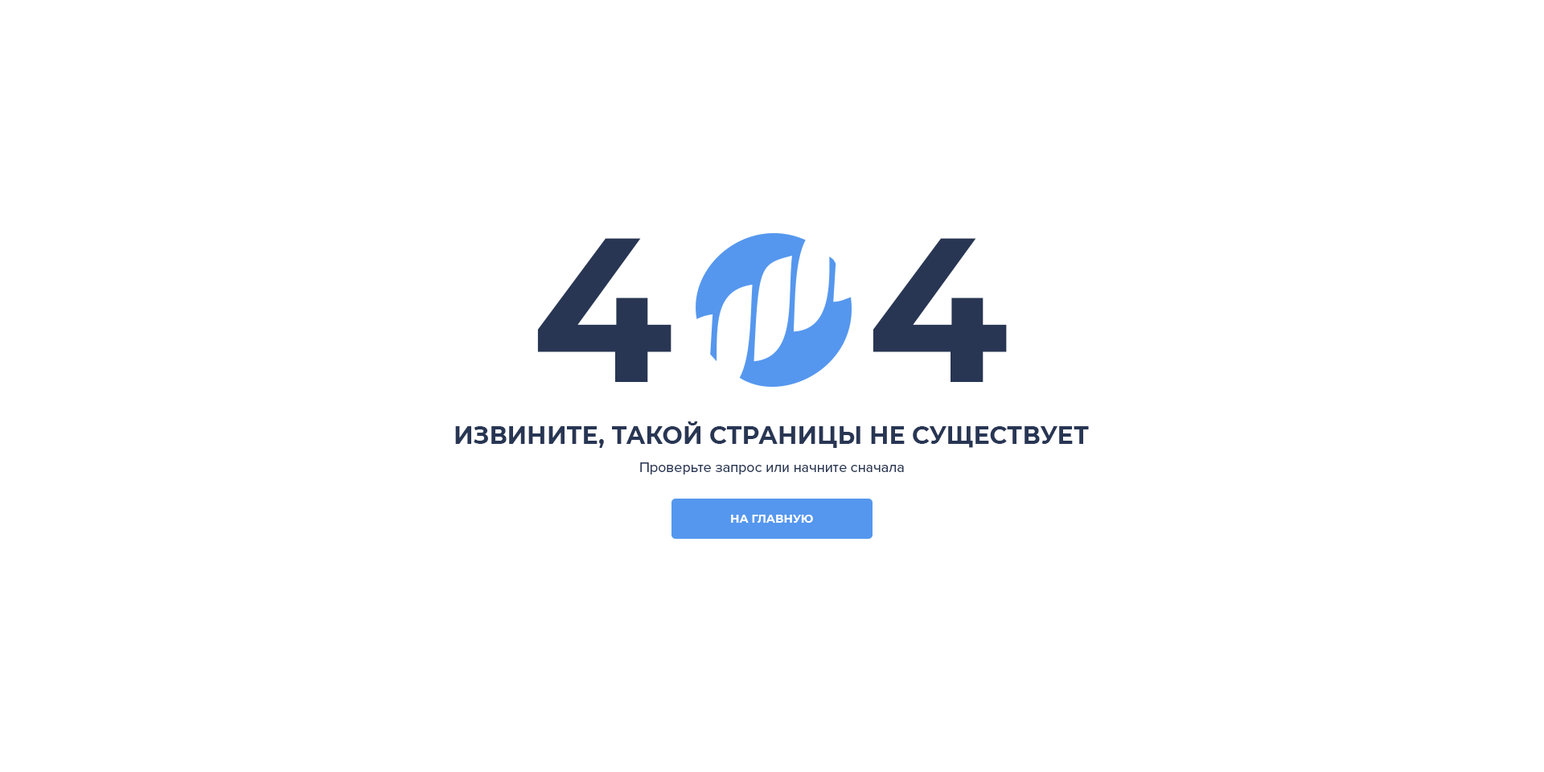
<style>
.page{position:relative;width:1544px;height:772px;background:#ffffff}
.page>*{position:absolute;margin:0}
.t1{font:205.1px "Montserrat-Bold";letter-spacing:0.025em;color:#283654}
.t2{font:24.1px "Montserrat-Bold";color:#283654;text-transform:uppercase}
.t3{font:14.5px "ProximaNova-Regular";color:#283654}
.t4{font:11.3px "Montserrat-Bold";color:#ffffff;text-transform:uppercase}
</style>
<div class="page">
<p class="t1" style="left:537px;top:238px;width:470px;height:144px">4   4</p>
<p class="t2" style="left:455px;top:421px;width:634px;height:27px">извините, такой страницы не существует</p>
<p class="t3" style="left:640px;top:462px;width:264px;height:13px">Проверьте запрос или начните сначала</p>
<p class="t4" style="left:731px;top:515px;width:82px;height:8px">на главную</p>
</div>
